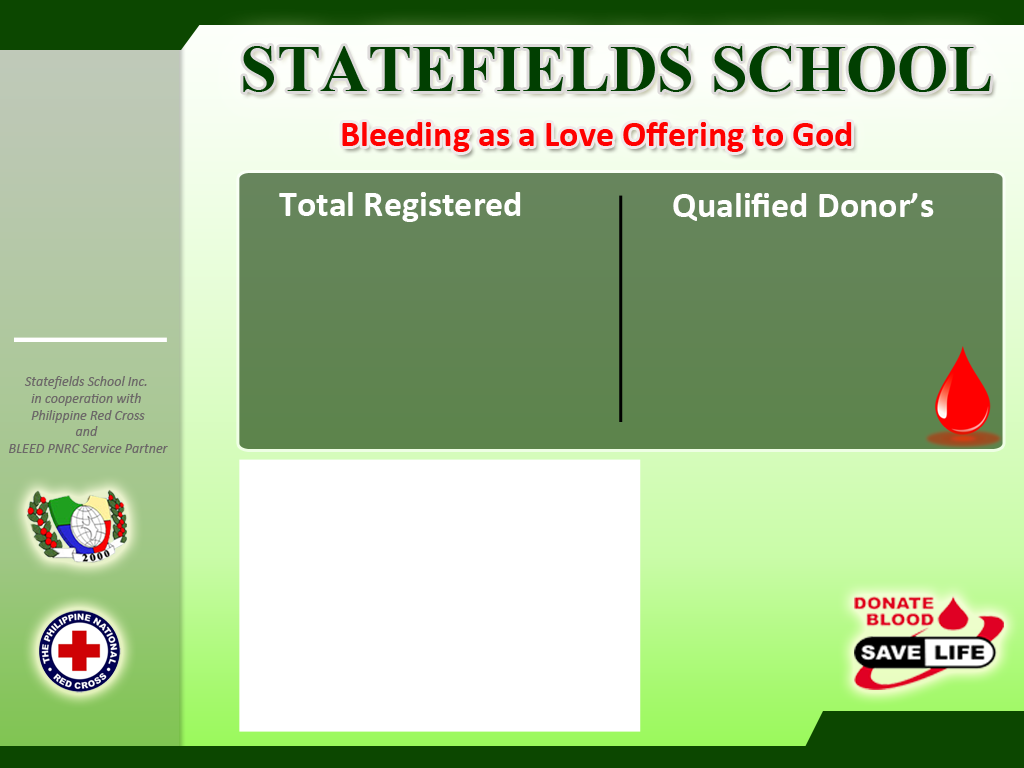
<style>
.page{position:relative;width:1024px;height:768px}
.page>*{position:absolute;margin:0}
.t1{font:65.9px "TimesNewRomanPS-BoldMT";color:#013f01}
.t2{font:36px "Calibri-Bold";color:#ff0000}
.t3{font:36px "Calibri-Bold";color:#ffffff}
.t4{font:36px "Calibri-Bold";color:#fffefe}
.t5{font:14px "Calibri-Italic";color:#6c6868}
</style>
<div class="page">
<p class="t1" style="left:243px;top:46px;width:748px;height:46px">STATEFIELDS SCHOOL</p>
<p class="t2" style="left:342px;top:122px;width:510px;height:30px">Bleeding as a Love Offering to God</p>
<p class="t3" style="left:279px;top:192px;width:242px;height:30px">Total Registered</p>
<p class="t4" style="left:673px;top:193px;width:261px;height:28px">Qualified Donor’s</p>
<p class="t5" style="left:9px;top:376px;width:159px;height:77px;text-align:center">Statefields School Inc. <br>in cooperation with <br>Philippine Red Cross<br>and <br>BLEED PNRC Service Partner</p>
</div>
